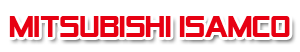
<style>
.page{position:relative;width:300px;height:52px;background:#ffffff}
.page>*{position:absolute;margin:0}
.t1{font:30px "AlienEncountersSolid";color:#e70012}
</style>
<div class="page">
<p class="t1" style="left:9px;top:16px;width:281px;height:21px">Mitsubishi Isamco</p>
</div>
